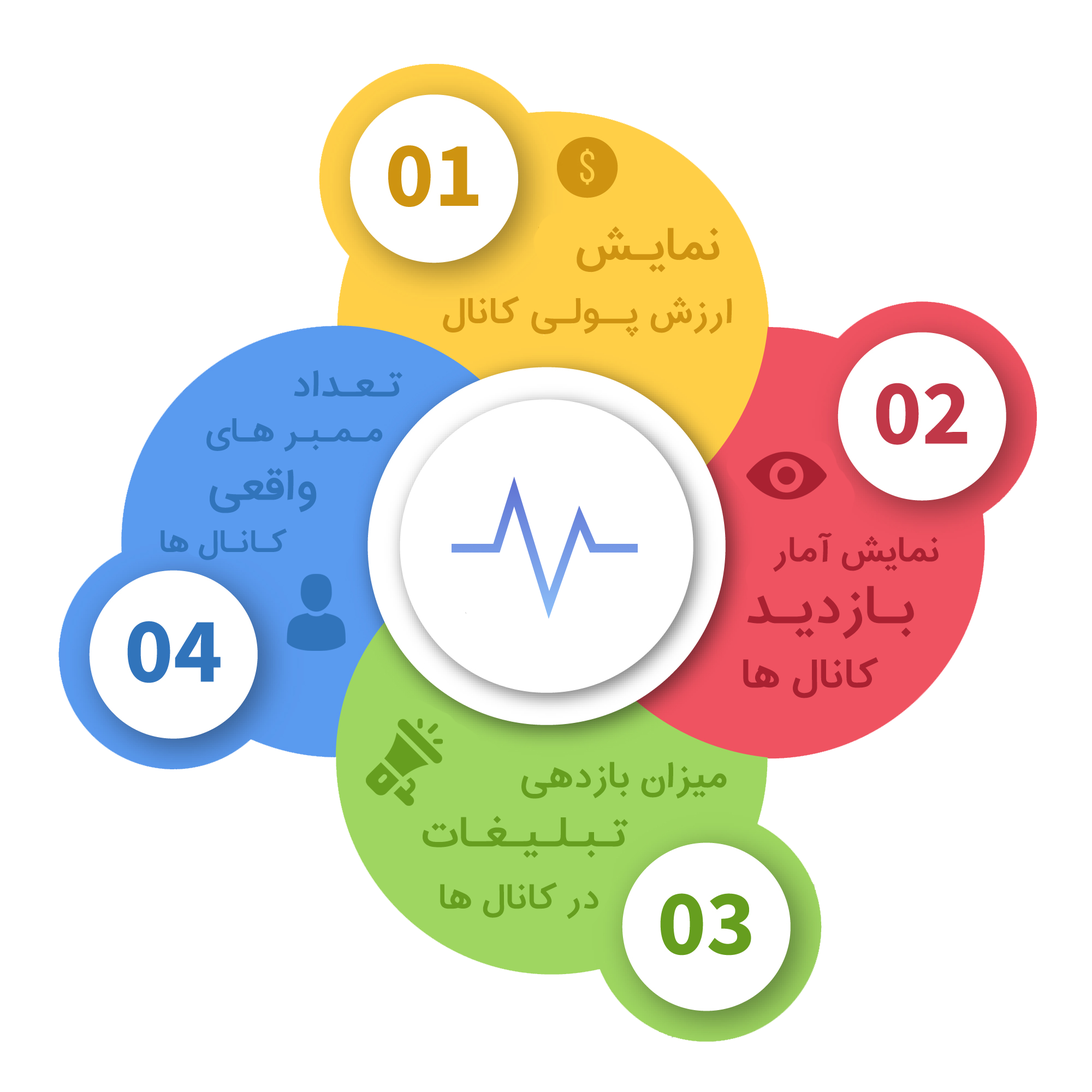
<style>
.page{position:relative;width:1092px;height:1092px;background:#ffffff}
.page>*{position:absolute;margin:0}
.t1{font:46px "IRANSans-Bold";color:#ce9311}
.t2{font:36.2px "IRANSans-Bold";color:#ce9311}
.t3{font:37.8px "IRANSans-Bold";color:#3174bb}
.t4{font:33.5px "IRANSans-Bold";color:#3174bb}
.t5{font:43.8px "IRANSans-Bold";color:#3174bb}
.t6{font:31.3px "IRANSans-Bold";color:#3174bb}
.t7{font:35.1px "IRANSans-Bold";color:#aa2131}
.t8{font:53.7px "IRANSans-Bold";color:#aa2131}
.t9{font:40.6px "IRANSans-Bold";color:#aa2131}
.t10{font:36.7px "IRANSans-Bold";color:#669e1f}
.t11{font:42.2px "IRANSans-Bold";color:#669e1f}
.t12{font:35.1px "IRANSans-Bold";color:#669e1f}
</style>
<div class="page">
<p class="t1" style="left:577px;top:226px;width:143px;height:46px">نمایـش</p>
<p class="t2" style="left:443px;top:296px;width:289px;height:41px">ارزش پــولـی کانال</p>
<p class="t3" style="left:294px;top:370px;width:108px;height:27px">تـعـداد</p>
<p class="t4" style="left:206px;top:418px;width:177px;height:34px">مـمـبـر هـای</p>
<p class="t5" style="left:210px;top:468px;width:107px;height:45px">واقعی</p>
<p class="t6" style="left:161px;top:529px;width:126px;height:31px">کـانـال ها</p>
<p class="t7" style="left:773px;top:532px;width:166px;height:40px">نمایش آمار</p>
<p class="t8" style="left:747px;top:586px;width:167px;height:53px">بـازدیـد</p>
<p class="t9" style="left:743px;top:657px;width:136px;height:41px">کانال ها</p>
<p class="t10" style="left:521px;top:762px;width:206px;height:37px">میزان بازدهی</p>
<p class="t11" style="left:423px;top:816px;width:205px;height:42px">تـبـلـیـغـات</p>
<p class="t12" style="left:440px;top:882px;width:158px;height:37px">در کانال ها</p>
</div>
